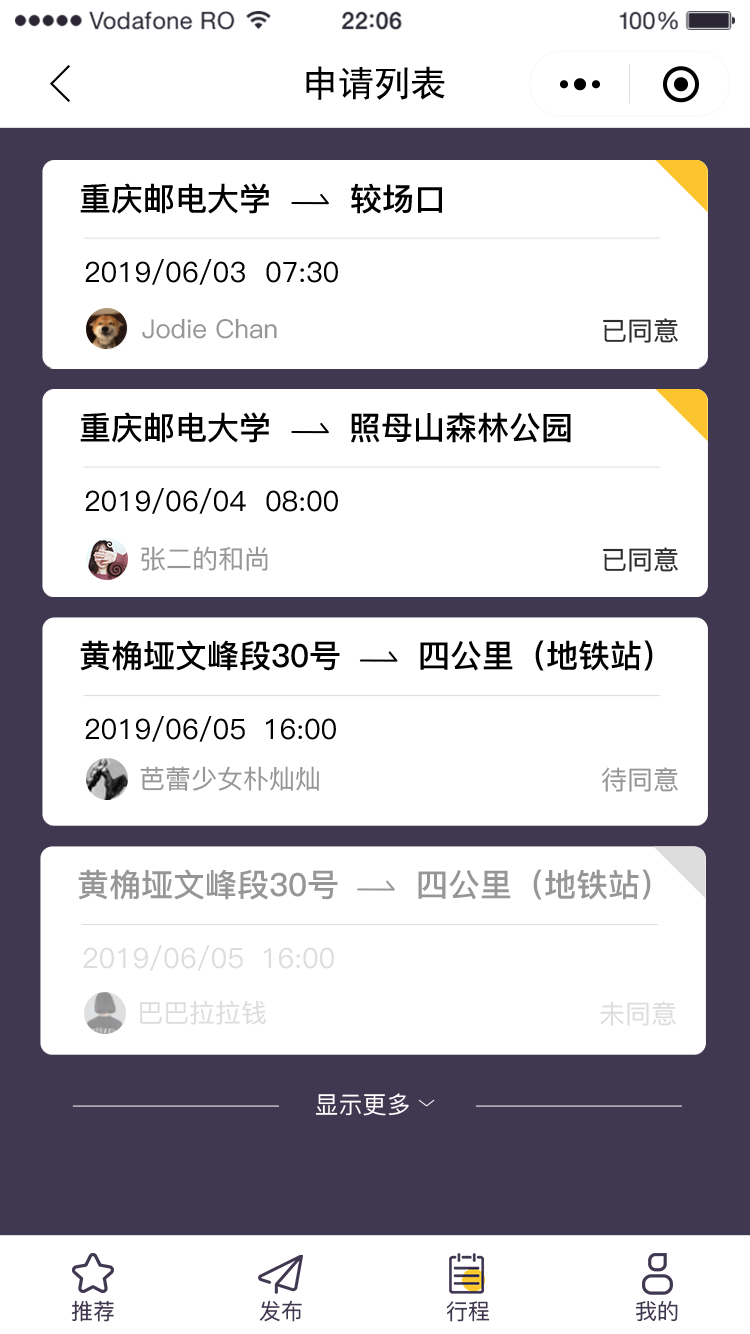
<style>
.page{position:relative;width:750px;height:1334px;background:#ffffff}
.page>*{position:absolute;margin:0}
.t1{font:36px "SimHei";color:#000000}
.t2{font:32px "PingFang-SC-Bold";color:#000000}
.t3{font:28px "PingFang-SC-Medium";color:#000000}
.t4{font:26px "PingFang-SC-Medium";color:#969696}
.t5{font:26px "PingFang-SC-Medium";color:#2d2d2d}
.t6{font:32px "PingFang-SC-Bold";color:#969696}
.t7{font:28px "PingFang-SC-Medium";color:#dddddd}
.t8{font:26px "PingFang-SC-Medium";color:#dddddd}
.t9{font:24px "PingFang-SC-Medium";color:#ffffff}
.t10{font:22px "PingFangSC-Regular";color:#403751}
</style>
<div class="page">
<p class="t1" style="left:306px;top:66px;width:139px;height:34px">申请列表</p>
<p class="t2" style="left:80px;top:183px;width:189px;height:31px">重庆邮电大学</p>
<p class="t2" style="left:351px;top:183px;width:91px;height:31px">较场口</p>
<p class="t3" style="left:85px;top:259px;width:160px;height:26px">2019/06/03</p>
<p class="t3" style="left:266px;top:261px;width:72px;height:22px">07:30</p>
<p class="t4" style="left:142px;top:318px;width:135px;height:21px">Jodie Chan</p>
<p class="t5" style="left:603px;top:318px;width:75px;height:25px">已同意</p>
<p class="t2" style="left:80px;top:412px;width:189px;height:31px">重庆邮电大学</p>
<p class="t2" style="left:351px;top:412px;width:220px;height:31px">照母山森林公园</p>
<p class="t3" style="left:85px;top:488px;width:161px;height:26px">2019/06/04</p>
<p class="t3" style="left:266px;top:490px;width:72px;height:22px">08:00</p>
<p class="t4" style="left:141px;top:546px;width:127px;height:25px">张二的和尚</p>
<p class="t5" style="left:603px;top:547px;width:75px;height:25px">已同意</p>
<p class="t2" style="left:80px;top:640px;width:260px;height:31px">黄桷垭文峰段30号</p>
<p class="t2" style="left:420px;top:640px;width:233px;height:31px">四公里（地铁站）</p>
<p class="t3" style="left:85px;top:716px;width:160px;height:26px">2019/06/05</p>
<p class="t3" style="left:266px;top:718px;width:70px;height:22px">16:00</p>
<p class="t4" style="left:140px;top:766px;width:179px;height:25px">芭蕾少女朴灿灿</p>
<p class="t4" style="left:602px;top:767px;width:76px;height:25px">待同意</p>
<p class="t6" style="left:78px;top:869px;width:260px;height:31px">黄桷垭文峰段30号</p>
<p class="t6" style="left:418px;top:869px;width:233px;height:31px">四公里（地铁站）</p>
<p class="t7" style="left:83px;top:945px;width:160px;height:26px">2019/06/05</p>
<p class="t7" style="left:264px;top:947px;width:70px;height:22px">16:00</p>
<p class="t8" style="left:140px;top:1000px;width:126px;height:25px">巴巴拉拉钱</p>
<p class="t8" style="left:600px;top:1001px;width:76px;height:25px">未同意</p>
<p class="t9" style="left:315px;top:1093px;width:94px;height:23px">显示更多</p>
<p class="t10" style="left:71px;top:1300px;width:43px;height:22px">推荐</p>
<p class="t10" style="left:259px;top:1300px;width:43px;height:22px">发布</p>
<p class="t10" style="left:446px;top:1301px;width:44px;height:21px">行程</p>
<p class="t10" style="left:636px;top:1300px;width:42px;height:21px">我的</p>
</div>
